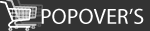
<style>
.page{position:relative;width:150px;height:31px;background:#333333}
.page>*{position:absolute;margin:0}
.t1{font:22px "MyriadPro-Regular";color:#ffffff}
</style>
<div class="page">
<p class="t1" style="left:41px;top:8px;width:103px;height:16px">POPOVER’S</p>
</div>
